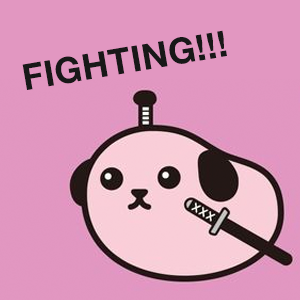
<style>
.page{position:relative;width:300px;height:300px;background:#e297c1}
.page>*{position:absolute;margin:0}
.t1{font:36px "HelveticaNeue-Bold";letter-spacing:0.016em;color:#181818}
</style>
<div class="page">
<p class="t1" style="left:22px;top:30px;width:205px;height:60px;rotate:-10deg">FIGHTING!!!</p>
</div>
